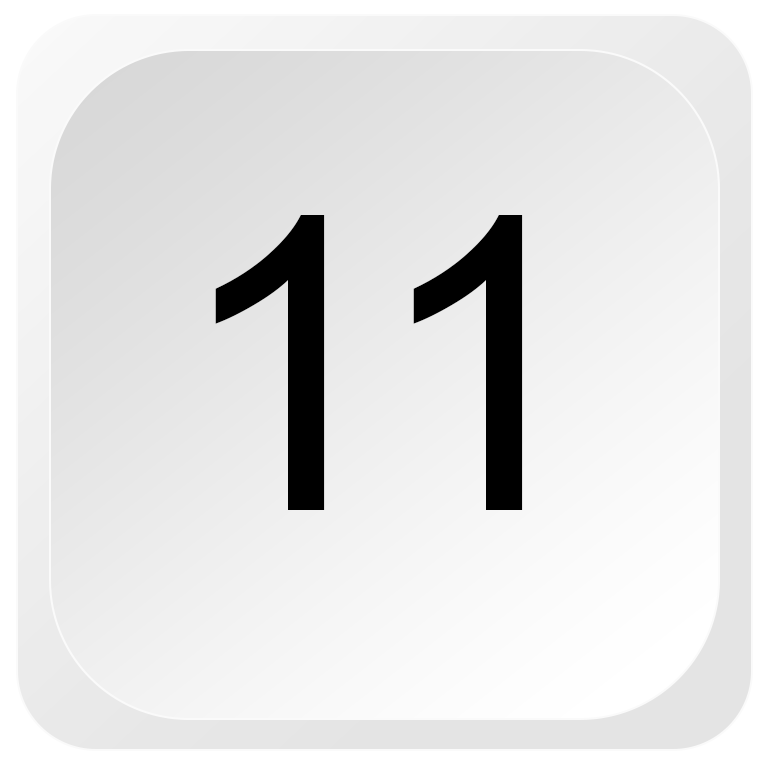
<style>
.page{position:relative;width:768px;height:768px}
.page>*{position:absolute;margin:0}
.t1{font:411px "ArialMT";color:#000000}
</style>
<div class="page">
<p class="t1" style="left:215px;top:215px;width:308px;height:295px">11</p>
</div>
